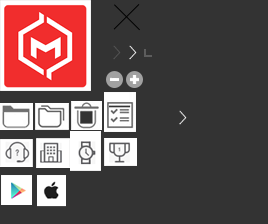
<style>
.page{position:relative;width:268px;height:224px;background:#333333}
.page>*{position:absolute;margin:0}
.t1{font:13.9px "NanumBarunGothicUltraLight";letter-spacing:0.05em;color:#565656;text-transform:uppercase;scale:1.73 1}
.t2{font:14px "NanumBarunGothicUltraLight";letter-spacing:0.05em;color:#ffffff;text-transform:uppercase;scale:1.72 1}
.t3{font:13.9px "NanumBarunGothicUltraLight";letter-spacing:0.05em;color:#ffffff;text-transform:uppercase;scale:1.73 1}
</style>
<div class="page">
<p class="t1" style="left:113px;top:45px;width:8px;height:15px">&gt;</p>
<p class="t2" style="left:129px;top:45px;width:8px;height:15px">&gt;</p>
<p class="t3" style="left:179px;top:110px;width:8px;height:15px">&gt;</p>
</div>
